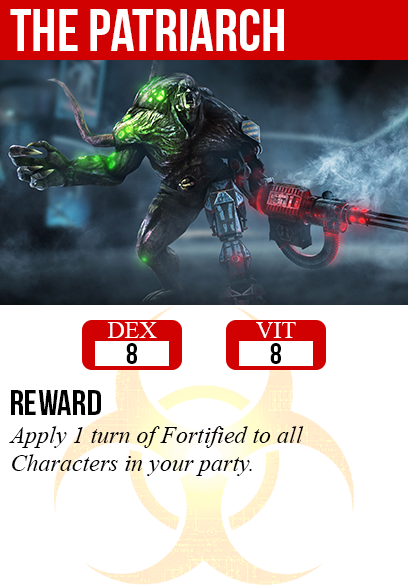
<style>
.page{position:relative;width:408px;height:585px;background:#ffffff}
.page>*{position:absolute;margin:0}
.t1{font:60px "BebasNeue";color:#ffffff}
.t2{font:24px "TimesNewRomanPSMT";color:#ffffff}
.t3{font:30px "BebasNeue";color:#000000}
.t4{font:36px "BebasNeue";color:#000000}
.t5{font:24px "TimesNewRomanPS-ItalicMT";color:#000000}
</style>
<div class="page">
<p class="t1" style="left:10px;top:9px;width:274px;height:42px">the patriarch</p>
<p class="t2" style="left:107px;top:322px;width:50px;height:16px">DEX</p>
<p class="t2" style="left:256px;top:322px;width:40px;height:16px">VIT</p>
<p class="t3" style="left:126px;top:343px;width:11px;height:21px">8</p>
<p class="t3" style="left:270px;top:343px;width:11px;height:21px">8</p>
<p class="t4" style="left:11px;top:390px;width:90px;height:25px">reward</p>
<p class="t5" style="left:9px;top:426px;width:295px;height:50px">Apply 1 turn of Fortified to all<br>Characters in your party.</p>
</div>
